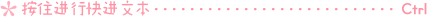
<style>
.page{position:relative;width:427px;height:17px;background:#ffffff}
.page>*{position:absolute;margin:0}
.t1{font:18px "¢è?";color:#ff93a5}
</style>
<div class="page">
<p class="t1" style="left:21px;top:0px;width:129px;height:16px">按住进行快进文本</p>
</div>
